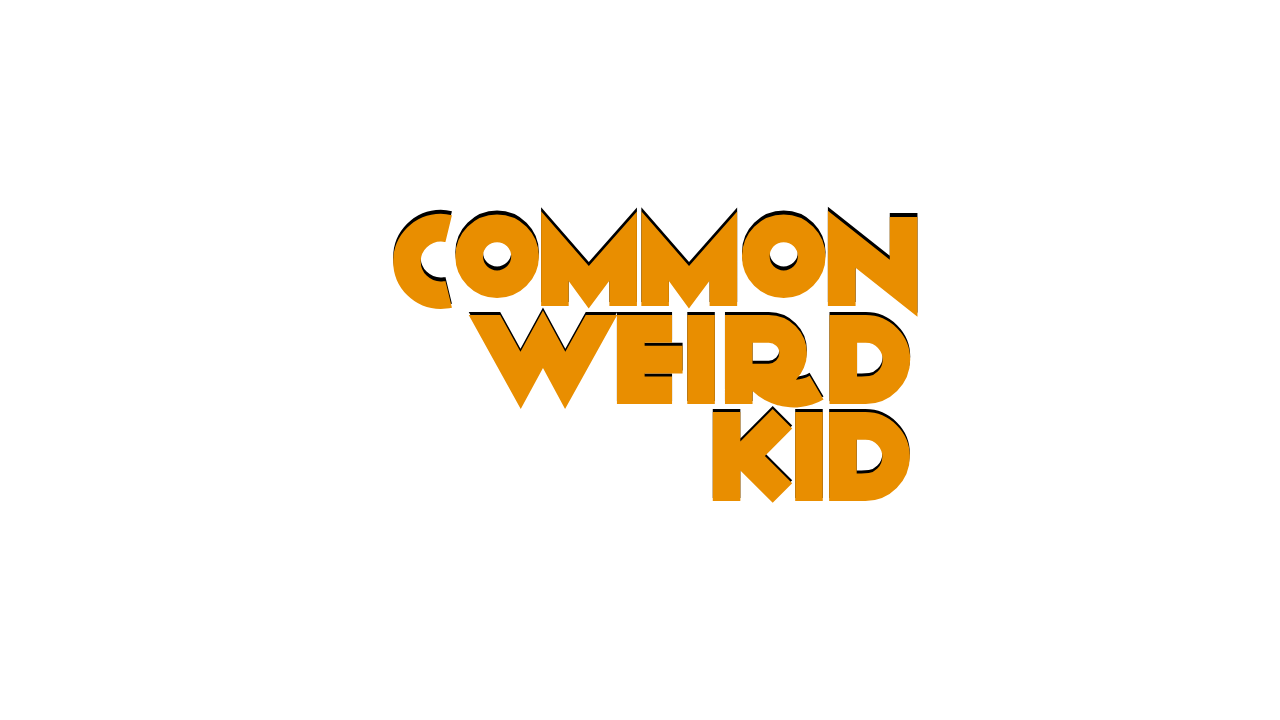
<style>
.page{position:relative;width:1280px;height:720px;background:#ffffff}
.page>*{position:absolute;margin:0}
.t1{font:130px "Anagram";color:#e98e00}
</style>
<div class="page">
<p class="t1" style="left:393px;top:206px;width:525px;height:107px">common</p>
<p class="t1" style="left:393px;top:210px;width:525px;height:107px">common</p>
<p class="t1" style="left:468px;top:307px;width:443px;height:99px">weird</p>
<p class="t1" style="left:468px;top:310px;width:443px;height:99px">weird</p>
<p class="t1" style="left:712px;top:406px;width:198px;height:94px">kid</p>
<p class="t1" style="left:712px;top:409px;width:198px;height:94px">kid</p>
</div>
